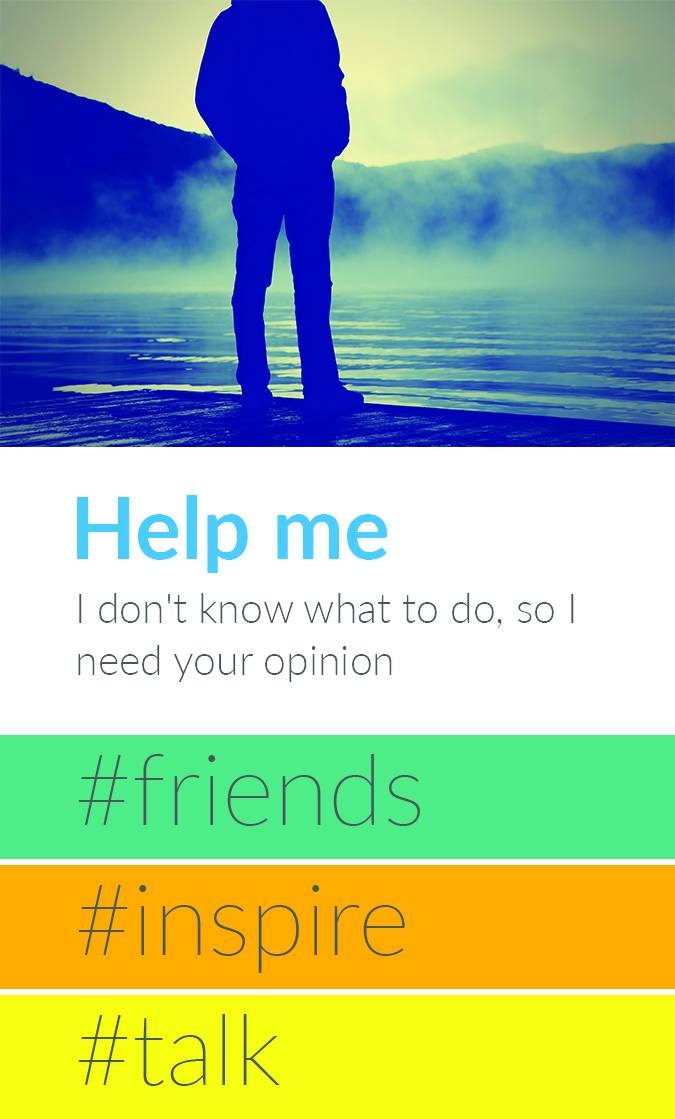
<style>
.page{position:relative;width:675px;height:1119px;background:#ffffff}
.page>*{position:absolute;margin:0}
.t1{font:86px "Lato-Bold";color:#4acdff}
.t2{font:41px/52px "Lato-Light";color:#48585a}
</style>
<div class="page">
<p class="t1" style="left:76px;top:495px;width:312px;height:78px">Help me</p>
<p class="t2" style="left:78px;top:593px;width:496px;height:89px;text-align:right">I don't know what to do, so I need your opinion</p>
</div>
